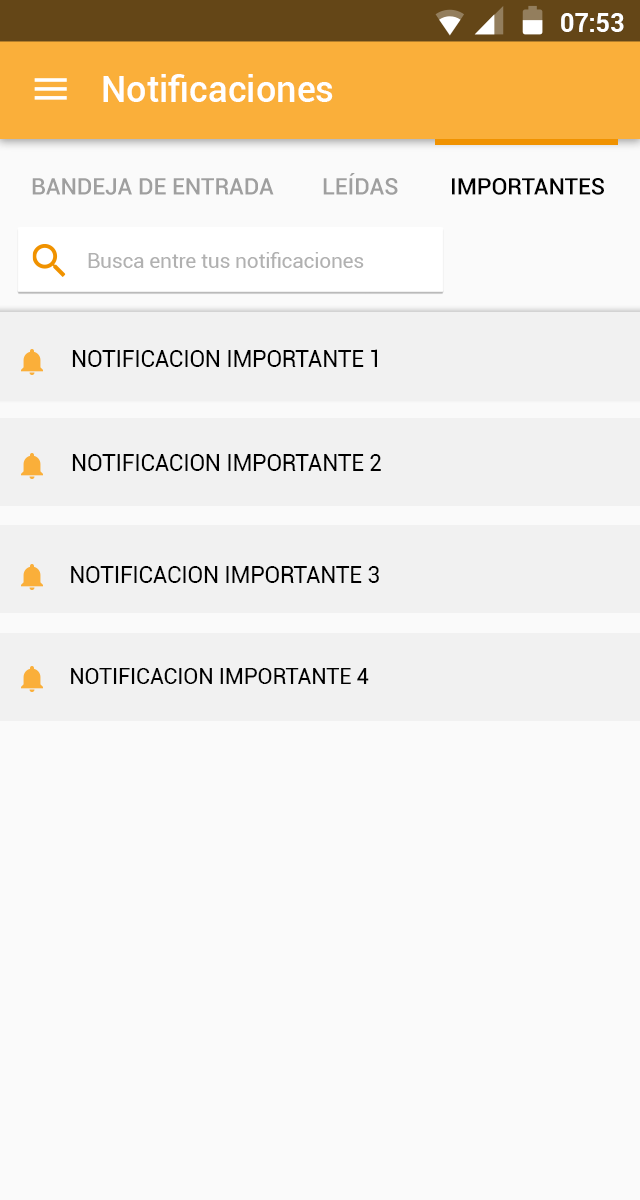
<style>
.page{position:relative;width:640px;height:1200px;background:#fafafa}
.page>*{position:absolute;margin:0}
.t1{font:24.9px "Roboto-Bold";color:#ffffff}
.t2{font:35.8px "Roboto-Medium";letter-spacing:0.005em;color:#ffffff}
.t3{font:22.9px "Roboto-Medium";color:#9f9f9f}
.t4{font:22.9px "Roboto-Medium";color:#000000}
.t5{font:20.8px "Roboto-Regular";letter-spacing:-0.01em;color:#b1b1b1}
.t6{font:22.9px "Roboto-Regular";letter-spacing:-0.01em;color:#000000}
.t7{font:22.1px "Roboto-Regular";letter-spacing:-0.01em;color:#000000}
</style>
<div class="page">
<p class="t1" style="left:561px;top:13px;width:63px;height:19px">07:53</p>
<p class="t2" style="left:103px;top:74px;width:230px;height:28px">Notificaciones</p>
<p class="t3" style="left:323px;top:173px;width:75px;height:22px">LEÍDAS</p>
<p class="t3" style="left:32px;top:178px;width:242px;height:17px">BANDEJA DE ENTRADA</p>
<p class="t4" style="left:452px;top:178px;width:152px;height:17px">IMPORTANTES</p>
<p class="t5" style="left:88px;top:252px;width:276px;height:16px">Busca entre tus notificaciones</p>
<p class="t6" style="left:72px;top:349px;width:305px;height:18px">NOTIFICACION IMPORTANTE 1</p>
<p class="t6" style="left:72px;top:454px;width:309px;height:17px">NOTIFICACION IMPORTANTE 2</p>
<p class="t6" style="left:71px;top:566px;width:308px;height:17px">NOTIFICACION IMPORTANTE 3</p>
<p class="t7" style="left:71px;top:668px;width:298px;height:16px">NOTIFICACION IMPORTANTE 4</p>
</div>
